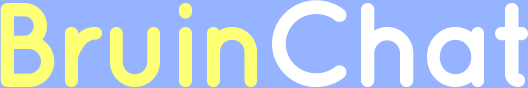
<style>
.page{position:relative;width:528px;height:88px;background:#96b3ff}
.page>*{position:absolute;margin:0}
.t1{font:120px "QuicksandBold-Regular";letter-spacing:-0.05em;color:#fdff75}
.t2{font:120px "QuicksandBold-Regular";letter-spacing:-0.05em;color:#ffffff}
</style>
<div class="page">
<p class="t1" style="left:0px;top:0px;width:528px;height:88px">Bruin<span class="t2">Chat</span></p>
</div>
